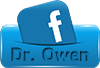
<style>
.page{position:relative;width:100px;height:68px;background:#ffffff}
.page>*{position:absolute;margin:0}
.t1{font:18px "FacebookLetterFaces"}
</style>
<div class="page">
<p class="t1" style="left:11px;top:47px;width:78px;height:15px">Dr. Owen</p>
</div>
